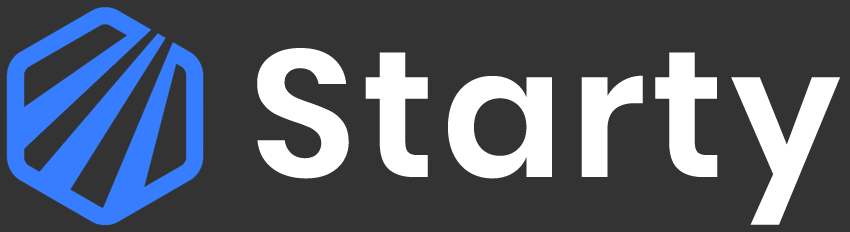
<style>
.page{position:relative;width:850px;height:232px;background:#333333}
.page>*{position:absolute;margin:0}
.t1{font:180px "Poppins-SemiBold";letter-spacing:0.04em;color:#ffffff}
</style>
<div class="page">
<p class="t1" style="left:257px;top:48px;width:583px;height:177px">Starty</p>
</div>
